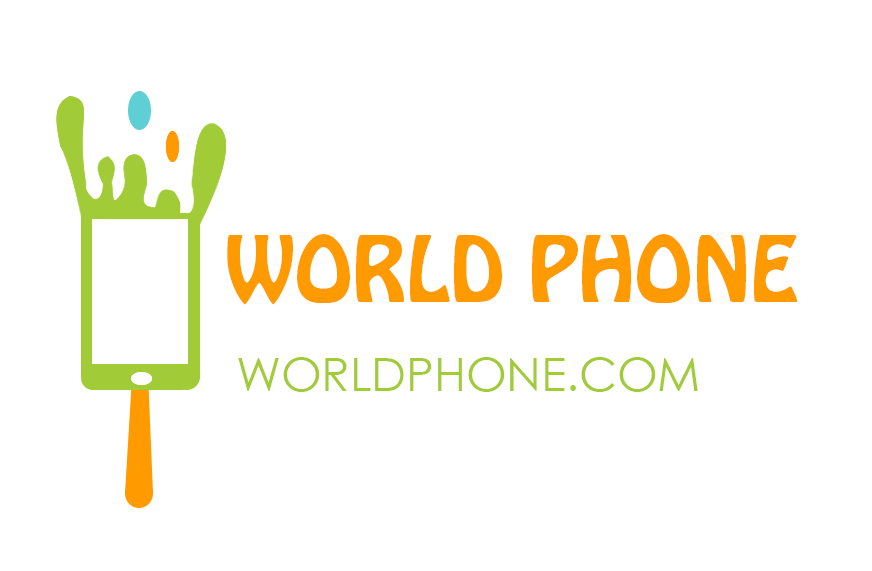
<style>
.page{position:relative;width:872px;height:571px;background:#ffffff}
.page>*{position:absolute;margin:0}
.t1{font:80.9px "HoboStd";color:#ff9a00}
.t2{font:46.3px "CenturyGothic";color:#a1cb37}
</style>
<div class="page">
<p class="t1" style="left:227px;top:234px;width:571px;height:71px">WORLD PHONE</p>
<p class="t2" style="left:238px;top:357px;width:460px;height:35px">WORLDPHONE.COM</p>
</div>
